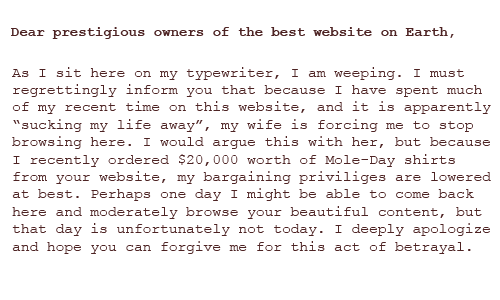
<style>
.page{position:relative;width:500px;height:300px;background:#ffffff}
.page>*{position:absolute;margin:0}
.t1{font:14px "CourierNewPS-BoldMT";color:#4d2323}
.t2{font:14.5px "CourierNewPSMT";color:#4d2323}
</style>
<div class="page">
<p class="t1" style="left:11px;top:27px;width:443px;height:12px">Dear prestigious owners of the best website on Earth,</p>
<p class="t2" style="left:12px;top:67px;width:479px;height:187px">As I sit here on my typewriter, I am weeping. I must<br>regrettingly inform you that because I have spent much<br>of my recent time on this website, and it is apparently<br>“sucking my life away”, my wife is forcing me to stop<br>browsing here. I would argue this with her, but because<br>I recently ordered $20,000 worth of Mole-Day shirts<br>from your website, my bargaining priviliges are lowered<br>at best. Perhaps one day I might be able to come back <br>here and moderately browse your beautiful content, but <br>that day is unfortunately not today. I deeply apologize<br>and hope you can forgive me for this act of betrayal.</p>
</div>
